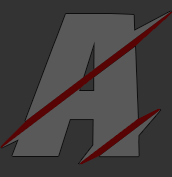
<style>
.page{position:relative;width:172px;height:177px;background:#333333}
.page>*{position:absolute;margin:0}
.t1{font:201.7px "MX-Regular";color:#595959;scale:0.88 1}
</style>
<div class="page">
<p class="t1" style="left:1px;top:11px;width:171px;height:153px">A</p>
</div>
